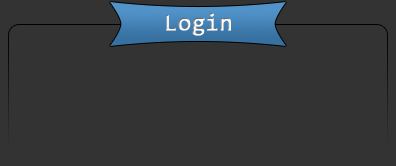
<style>
.page{position:relative;width:396px;height:166px;background:#333333}
.page>*{position:absolute;margin:0}
.t1{font:24px "Consolas";color:#ffffff;font-weight:bold}
</style>
<div class="page">
<p class="t1" style="left:166px;top:13px;width:65px;height:23px">Login</p>
</div>
